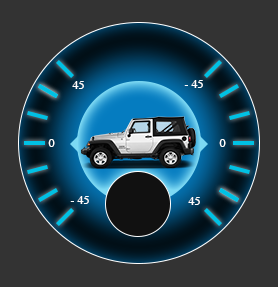
<style>
.page{position:relative;width:278px;height:287px;background:#333333}
.page>*{position:absolute;margin:0}
.t1{font:12px "Times-Roman";color:#ffffff}
</style>
<div class="page">
<p class="t1" style="left:72px;top:81px;width:12px;height:8px">45</p>
<p class="t1" style="left:184px;top:80px;width:19px;height:8px">- 45</p>
<p class="t1" style="left:48px;top:139px;width:7px;height:8px">0</p>
<p class="t1" style="left:219px;top:139px;width:7px;height:8px">0</p>
<p class="t1" style="left:70px;top:196px;width:19px;height:8px">- 45</p>
<p class="t1" style="left:188px;top:197px;width:12px;height:8px">45</p>
</div>
